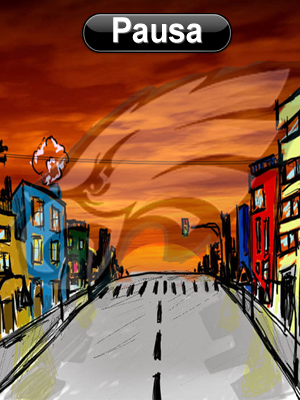
<style>
.page{position:relative;width:300px;height:400px}
.page>*{position:absolute;margin:0}
.t1{font:35px "Arial-BoldMT";letter-spacing:-0.005em;color:#ffffff;scale:0.9 1}
</style>
<div class="page">
<p class="t1" style="left:113px;top:17px;width:89px;height:26px">Pausa</p>
</div>
